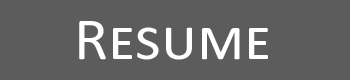
<style>
.page{position:relative;width:350px;height:80px;background:#5c5c5c}
.page>*{position:absolute;margin:0}
.t1{font:60px "Calibri";color:#ffffff;font-variant:small-caps;scale:1.05 1}
</style>
<div class="page">
<p class="t1" style="left:79px;top:21px;width:189px;height:39px">Resume</p>
</div>
